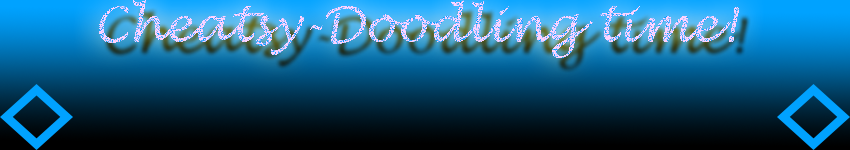
<style>
.page{position:relative;width:850px;height:150px}
.page>*{position:absolute;margin:0}
.t1{font:48px "LucidaHandwriting-Italic"}
</style>
<div class="page">
<p class="t1" style="left:99px;top:0px;width:640px;height:58px">Cheatsy-Doodling time!</p>
</div>
